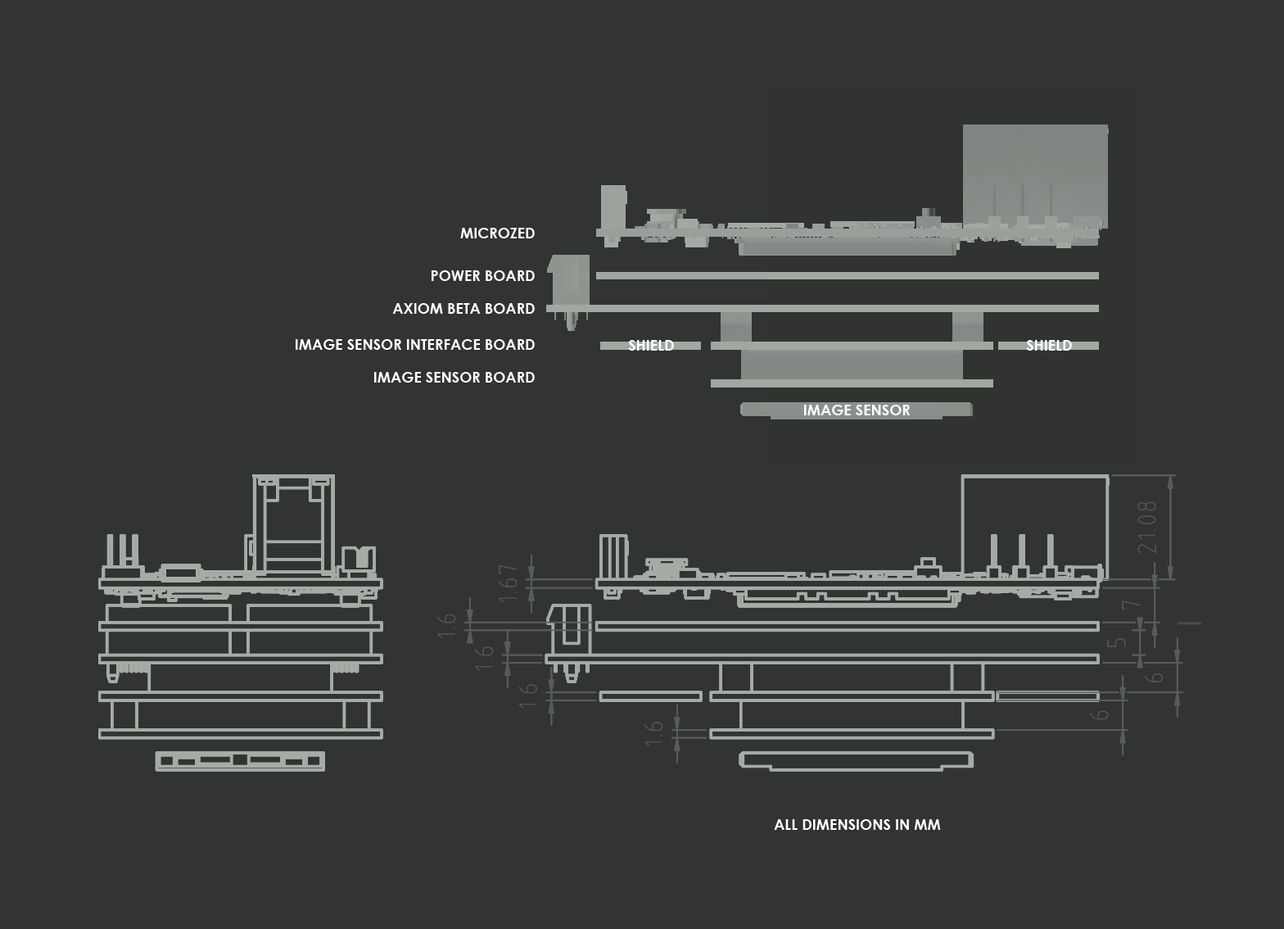
<style>
.page{position:relative;width:1284px;height:929px;background:#313432}
.page>*{position:absolute;margin:0}
.t1{font:14.7px "CenturyGothic-Bold";color:#ffffff;text-transform:uppercase}
</style>
<div class="page">
<p class="t1" style="left:460px;top:228px;width:75px;height:10px">Microzed</p>
<p class="t1" style="left:432px;top:270px;width:103px;height:11px">Power Board</p>
<p class="t1" style="left:392px;top:303px;width:143px;height:11px">AXIOM Beta Board</p>
<p class="t1" style="left:296px;top:339px;width:239px;height:11px">Image Sensor Interface board</p>
<p class="t1" style="left:628px;top:340px;width:46px;height:10px">Shield</p>
<p class="t1" style="left:1026px;top:340px;width:46px;height:10px">Shield</p>
<p class="t1" style="left:374px;top:372px;width:161px;height:10px">Image Sensor board</p>
<p class="t1" style="left:804px;top:405px;width:106px;height:10px">Image Sensor</p>
<p class="t1" style="left:774px;top:819px;width:167px;height:11px">all dimensions in MM</p>
</div>
